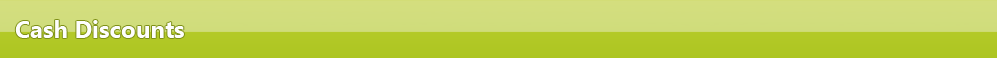
<style>
.page{position:relative;width:997px;height:58px}
.page>*{position:absolute;margin:0}
.t1{font:24px "SegoeUI-Bold";color:#fefefe}
</style>
<div class="page">
<p class="t1" style="left:15px;top:20px;width:169px;height:18px">Cash Discounts</p>
</div>
